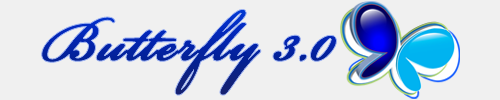
<style>
.page{position:relative;width:500px;height:100px;background:#f0f0f0}
.page>*{position:absolute;margin:0}
.t1{font:85.3px "BickhamScriptPro-Regular";font-weight:bold}
</style>
<div class="page">
<p class="t1" style="left:41px;top:9px;width:296px;height:86px">Butterfly 3.0</p>
</div>
